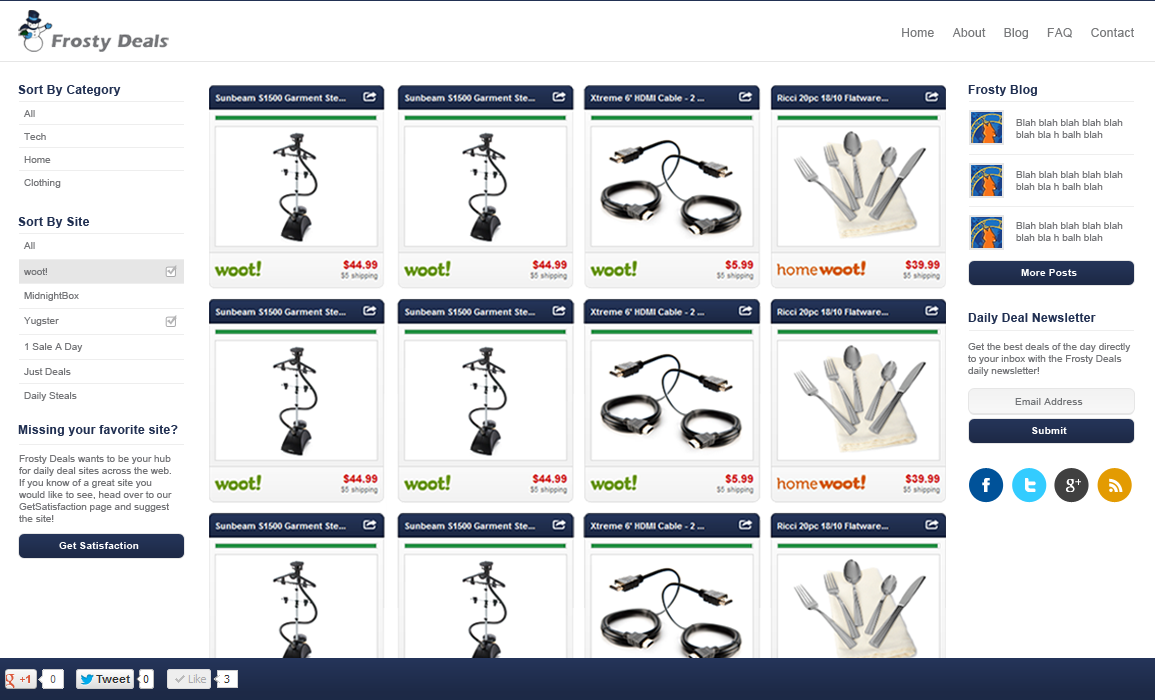
<style>
.page{position:relative;width:1155px;height:700px;background:#ffffff}
.page>*{position:absolute;margin:0}
.t1{font:12px "ArialMT";letter-spacing:0.025em;color:#78797b}
.t2{font:12px "Arial-BoldMT";letter-spacing:0.025em;color:#213052}
.t3{font:10px "ArialMT";color:#757679}
.t4{font:10px "Arial-BoldMT";letter-spacing:0.025em;color:#ffffff}
.t5{font:10px "ArialMT";letter-spacing:0.025em;color:#727477}
</style>
<div class="page">
<p class="t1" style="left:902px;top:28px;width:232px;height:11px">Home     About     Blog     FAQ     Contact</p>
<p class="t2" style="left:18px;top:85px;width:103px;height:11px">Sort By Category</p>
<p class="t2" style="left:968px;top:85px;width:69px;height:11px">Frosty Blog</p>
<p class="t3" style="left:23px;top:110px;width:12px;height:7px">All</p>
<p class="t3" style="left:1016px;top:119px;width:107px;height:19px">Blah blah blah blah blah<br>blah bla h balh blah</p>
<p class="t3" style="left:24px;top:133px;width:22px;height:7px">Tech</p>
<p class="t3" style="left:24px;top:156px;width:27px;height:7px">Home</p>
<p class="t3" style="left:1016px;top:171px;width:107px;height:19px">Blah blah blah blah blah<br>blah bla h balh blah</p>
<p class="t3" style="left:24px;top:179px;width:37px;height:9px">Clothing</p>
<p class="t2" style="left:18px;top:217px;width:72px;height:11px">Sort By Site</p>
<p class="t3" style="left:1016px;top:222px;width:107px;height:19px">Blah blah blah blah blah<br>blah bla h balh blah</p>
<p class="t3" style="left:23px;top:242px;width:12px;height:7px">All</p>
<p class="t3" style="left:24px;top:268px;width:23px;height:7px">woot!</p>
<p class="t4" style="left:1021px;top:269px;width:56px;height:7px">More Posts</p>
<p class="t3" style="left:24px;top:292px;width:55px;height:9px">MidnightBox</p>
<p class="t3" style="left:24px;top:317px;width:35px;height:9px">Yugster</p>
<p class="t2" style="left:968px;top:313px;width:128px;height:11px">Daily Deal Newsletter</p>
<p class="t3" style="left:25px;top:343px;width:58px;height:9px">1 Sale A Day</p>
<p class="t3" style="left:968px;top:343px;width:163px;height:33px">Get the best deals of the day directly<br>to your inbox with the Frosty Deals<br>daily newsletter!</p>
<p class="t3" style="left:24px;top:368px;width:47px;height:7px">Just Deals</p>
<p class="t3" style="left:24px;top:392px;width:53px;height:9px">Daily Steals</p>
<p class="t5" style="left:1015px;top:398px;width:68px;height:7px">Email Address</p>
<p class="t2" style="left:18px;top:425px;width:160px;height:11px">Missing your favorite site?</p>
<p class="t4" style="left:1032px;top:427px;width:35px;height:7px">Submit</p>
<p class="t3" style="left:19px;top:455px;width:153px;height:67px">Frosty Deals wants to be your hub<br>for daily deal sites across the web.<br>If you know of a great site you<br>would like to see, head over to our<br>GetSatisfaction page and suggest<br>the site!</p>
<p class="t4" style="left:59px;top:542px;width:80px;height:7px">Get Satisfaction</p>
</div>
